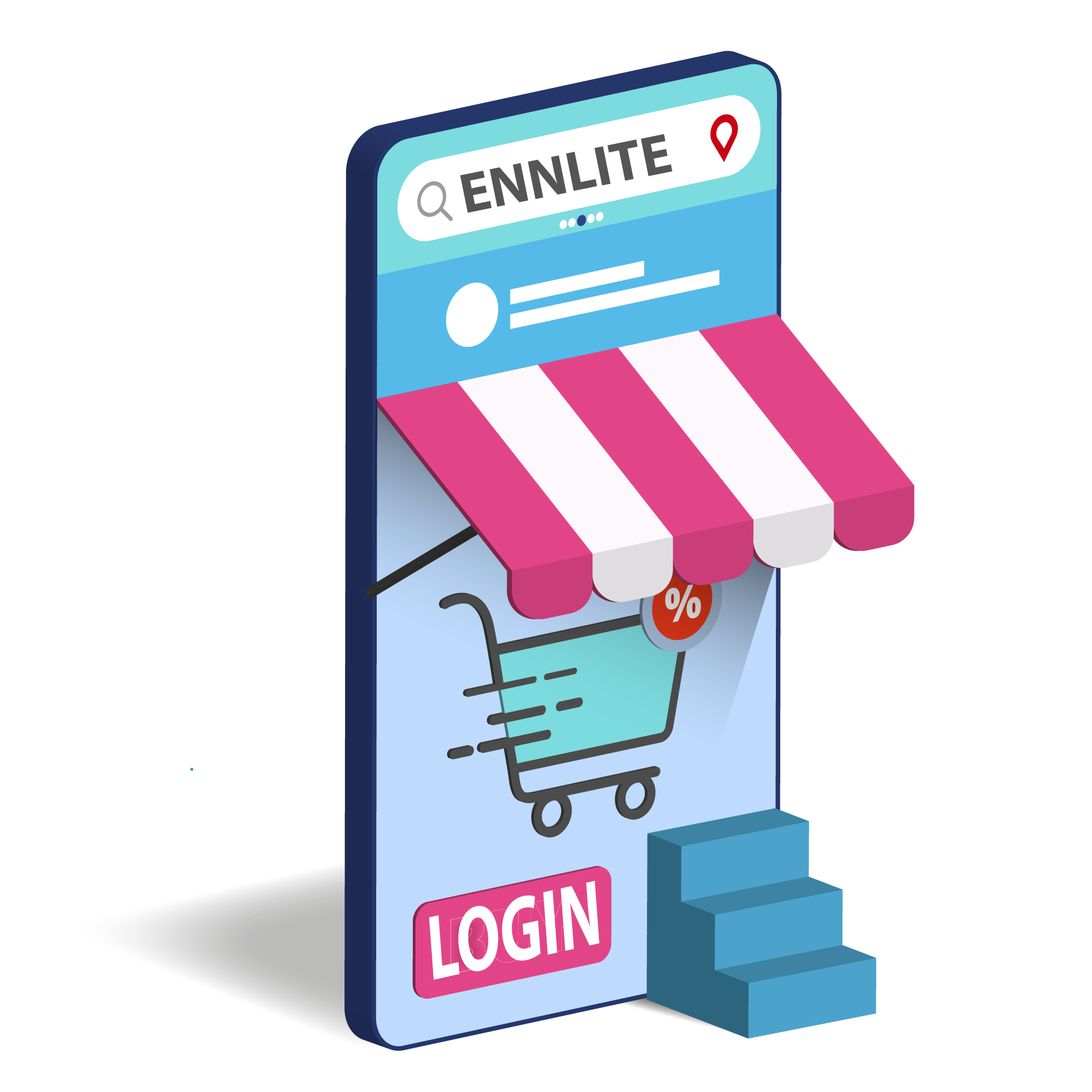
<style>
.page{position:relative;width:1092px;height:1092px;background:#ffffff}
.page>*{position:absolute;margin:0}
.t1{font:56.6px "MyriadPro-Bold";color:#555555}
.t2{font:92.7px "MyriadPro-Bold";color:#ffffff;scale:0.67 1}
</style>
<div class="page">
<p class="t1" style="left:460px;top:134px;width:213px;height:79px;rotate:-11deg">ENNLITE</p>
<p class="t2" style="left:429px;top:881px;width:171px;height:99px;rotate:-13deg">LOGIN</p>
</div>
